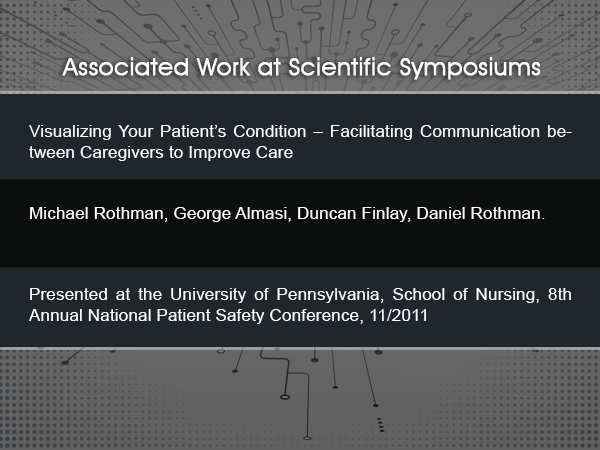
<style>
.page{position:relative;width:600px;height:450px;background:#20262c}
.page>*{position:absolute;margin:0}
.t1{font:24px "AvantGardeITCbyBT-Book";letter-spacing:0.01em;color:#ffffff;font-weight:bold}
.t2{font:17px "ArialMT";letter-spacing:0.01em;color:#ffffff}
</style>
<div class="page">
<p class="t1" style="left:62px;top:57px;width:479px;height:23px">Associated Work at Scientific Symposiums</p>
<p class="t2" style="left:29px;top:125px;width:543px;height:199px;text-align:justify">Visualizing Your Patient’s Condition – Facilitating Communication between Caregivers to Improve Care<br><br><br>Michael Rothman, George Almasi, Duncan Finlay, Daniel Rothman.<br><br><br><br>Presented at the University of Pennsylvania, School of Nursing, 8th Annual National Patient Safety Conference, 11/2011</p>
</div>
